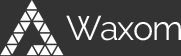
<style>
.page{position:relative;width:181px;height:56px;background:#333333}
.page>*{position:absolute;margin:0}
.t1{font:34px "Raleway-Regular";letter-spacing:-0.04em;color:#ffffff}
</style>
<div class="page">
<p class="t1" style="left:66px;top:15px;width:115px;height:26px">Waxom</p>
</div>
